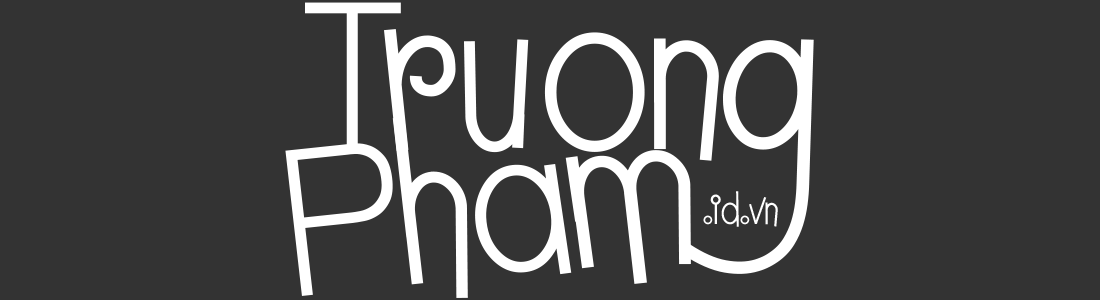
<style>
.page{position:relative;width:1100px;height:300px;background:#333333}
.page>*{position:absolute;margin:0}
.t1{font:185.3px "UTM-Tam-Le";color:#ffffff}
.t2{font:185.4px "UTM-Tam-Le";color:#ffffff;scale:1.04 1}
.t3{font:36.5px "UTM-Tam-Le";color:#ffffff}
</style>
<div class="page">
<p class="t1" style="left:305px;top:2px;width:509px;height:272px">Truong</p>
<p class="t2" style="left:285px;top:117px;width:406px;height:181px;rotate:-6deg">Pham</p>
<p class="t3" style="left:703px;top:191px;width:75px;height:36px">.id.vn</p>
</div>
